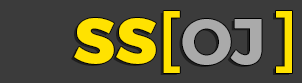
<style>
.page{position:relative;width:302px;height:83px;background:#3b3b3b}
.page>*{position:absolute;margin:0}
.t1{font:64px "Montserrat-ExtraBold";color:#ffe200}
.t2{font:70.8px "Montserrat-Regular";color:#ffe200}
.t3{font:63.8px "Montserrat-Bold";color:#aaaaaa}
</style>
<div class="page">
<p class="t1" style="left:74px;top:11px;width:218px;height:62px">SS<span class="t2">[</span><span class="t3">OJ</span><span class="t2">]</span></p>
</div>
